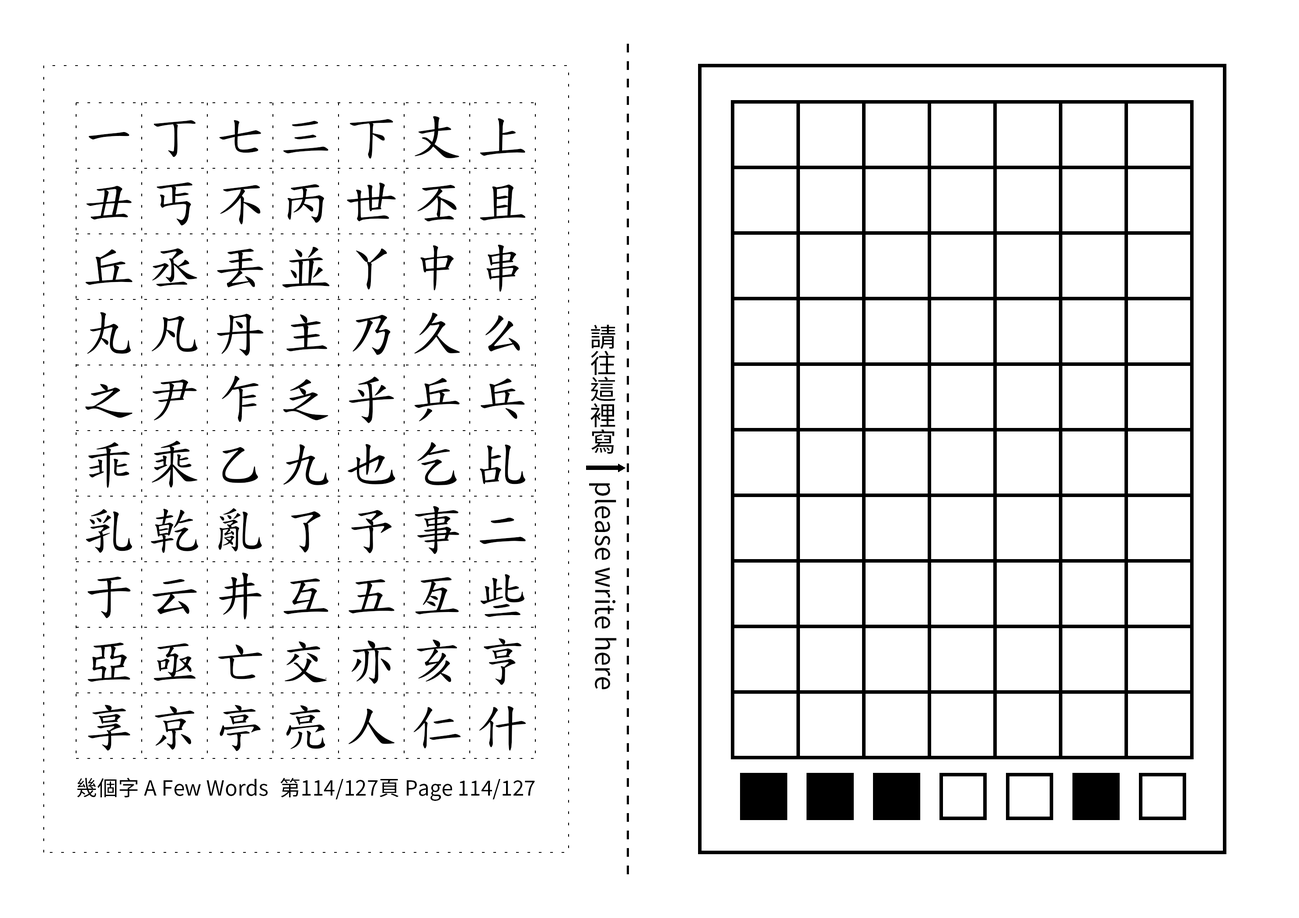
<style>
.page{position:relative;width:1299px;height:918px;background:#ffffff}
.page>*{position:absolute;margin:0}
.t1{font:52.5px/65.6px "TW-Kai-98_1";letter-spacing:0.25em;color:#000000}
.t2{font:26.2px "SourceHanSansTC-Regular";color:#000000}
.t3{font:21px "SourceHanSansTC-Regular";color:#000000}
</style>
<div class="page">
<p class="t1" style="left:85px;top:116px;width:441px;height:636px;text-align:center">一丁七三下丈上丑丐不丙世丕且丘丞丟並丫中串丸凡丹主乃久么之尹乍乏乎乒乓乖乘乙九也乞乩乳乾亂了予事二于云井互五亙些亞亟亡交亦亥亨享京亭亮人仁什</p>
<p class="t2" style="left:589px;top:324px;width:28px;height:366px;text-align:center">請往這裡寫　please write here</p>
<p class="t3" style="left:77px;top:778px;width:191px;height:20px">幾個字 A Few Words</p>
<p class="t3" style="left:280px;top:778px;width:255px;height:23px">第114/127頁 Page 114/127</p>
</div>
